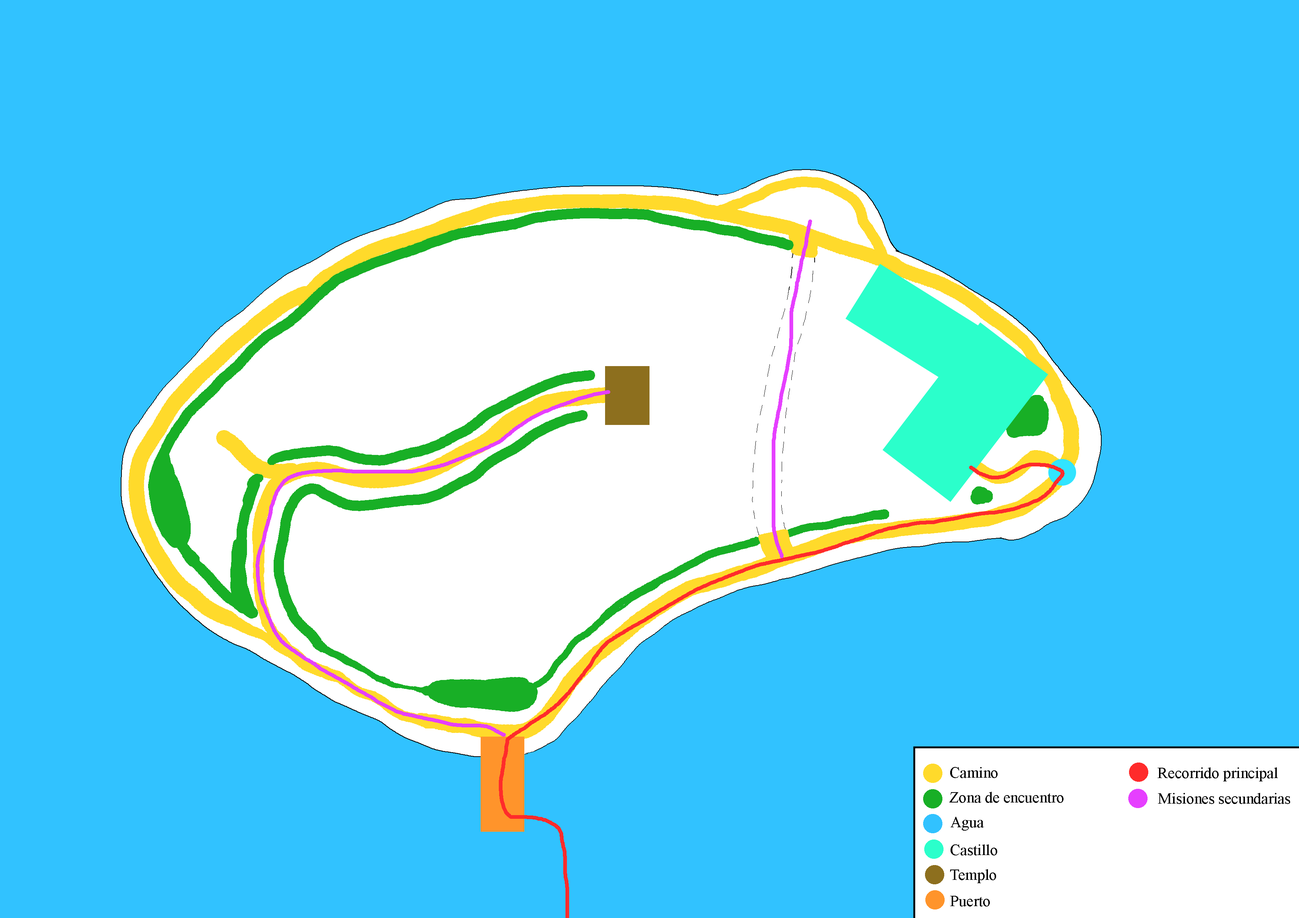
<style>
.page{position:relative;width:1299px;height:918px;background:#31c2ff}
.page>*{position:absolute;margin:0}
.t1{font:15.4px "TimesNewRomanPSMT";color:#000000}
</style>
<div class="page">
<p class="t1" style="left:950px;top:767px;width:47px;height:11px">Camino</p>
<p class="t1" style="left:1157px;top:767px;width:121px;height:15px">Recorrido principal</p>
<p class="t1" style="left:949px;top:792px;width:114px;height:11px">Zona de encuentro</p>
<p class="t1" style="left:1158px;top:793px;width:132px;height:11px">Misiones secundarias</p>
<p class="t1" style="left:950px;top:817px;width:34px;height:14px">Agua</p>
<p class="t1" style="left:950px;top:844px;width:47px;height:12px">Castillo</p>
<p class="t1" style="left:950px;top:869px;width:46px;height:14px">Templo</p>
<p class="t1" style="left:950px;top:896px;width:40px;height:11px">Puerto</p>
</div>
